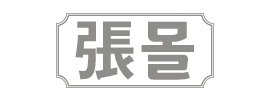
<style>
.page{position:relative;width:270px;height:100px;background:#ffffff}
.page>*{position:absolute;margin:0}
.t1{font:64.9px "AdobeGothicStd-Bold";color:#8e8d8b}
.t2{font:65.6px "GyeonggiTitleV";color:#8e8d8b}
</style>
<div class="page">
<p class="t1" style="left:75px;top:21px;width:59px;height:59px">張</p>
<p class="t2" style="left:141px;top:21px;width:53px;height:59px">몰</p>
</div>
